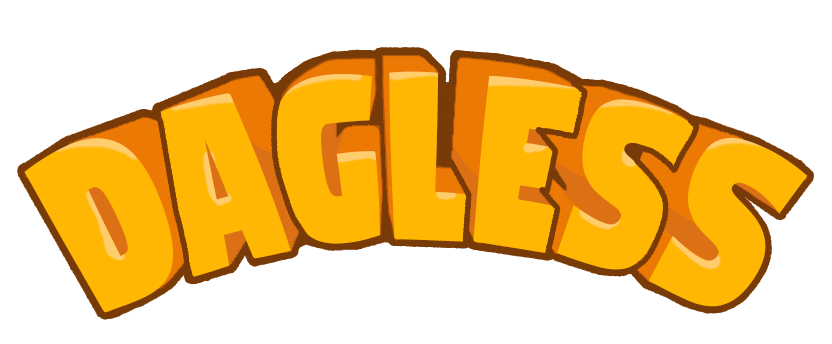
<style>
.page{position:relative;width:832px;height:344px;background:#ffffff}
.page>*{position:absolute;margin:0}
.t1{font:247.4px "Digitalt";color:#ffb703;scale:0.88 1}
</style>
<div class="page">
<p class="t1" style="left:24px;top:71px;width:784px;height:242px">DAGLESS</p>
</div>
